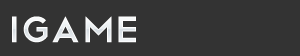
<style>
.page{position:relative;width:300px;height:56px;background:#333333}
.page>*{position:absolute;margin:0}
.t1{font:48px "Telegrafico";color:#ffffff}
</style>
<div class="page">
<p class="t1" style="left:12px;top:16px;width:124px;height:27px">iGame</p>
</div>
